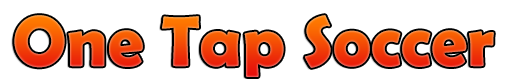
<style>
.page{position:relative;width:512px;height:83px;background:#ffffff}
.page>*{position:absolute;margin:0}
.t1{font:72px "BerlinSansFBDemi-Bold"}
</style>
<div class="page">
<p class="t1" style="left:14px;top:15px;width:480px;height:62px">One Tap Soccer</p>
</div>
